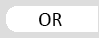
<style>
.page{position:relative;width:99px;height:38px;background:#ffffff}
.page>*{position:absolute;margin:0}
.t1{font:12px "Calibri";color:#000000}
</style>
<div class="page">
<p class="t1" style="left:39px;top:13px;width:23px;height:13px">OR</p>
</div>
